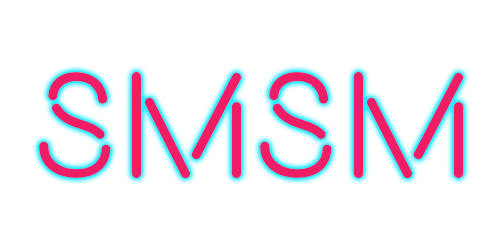
<style>
.page{position:relative;width:500px;height:250px;background:#ffffff}
.page>*{position:absolute;margin:0}
.t1{font:150px "Beon-Medium";color:#f01c66}
</style>
<div class="page">
<p class="t1" style="left:39px;top:72px;width:425px;height:107px">SMSM</p>
</div>
